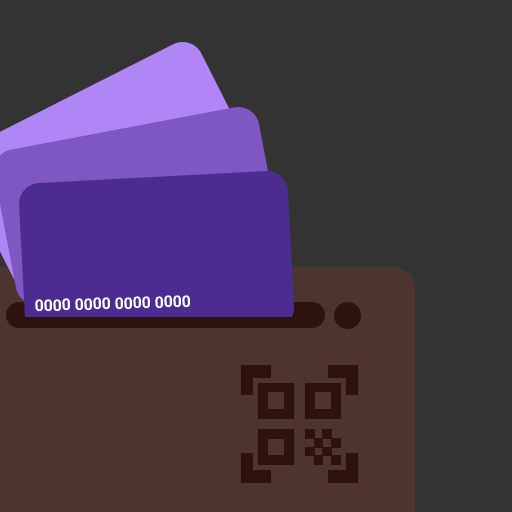
<style>
.page{position:relative;width:512px;height:512px;background:#333333}
.page>*{position:absolute;margin:0}
.t1{font:16px "Roboto-Bold";color:#ffffff}
</style>
<div class="page">
<p class="t1" style="left:35px;top:295px;width:155px;height:17px;rotate:-2deg">0000 0000 0000 0000</p>
</div>
